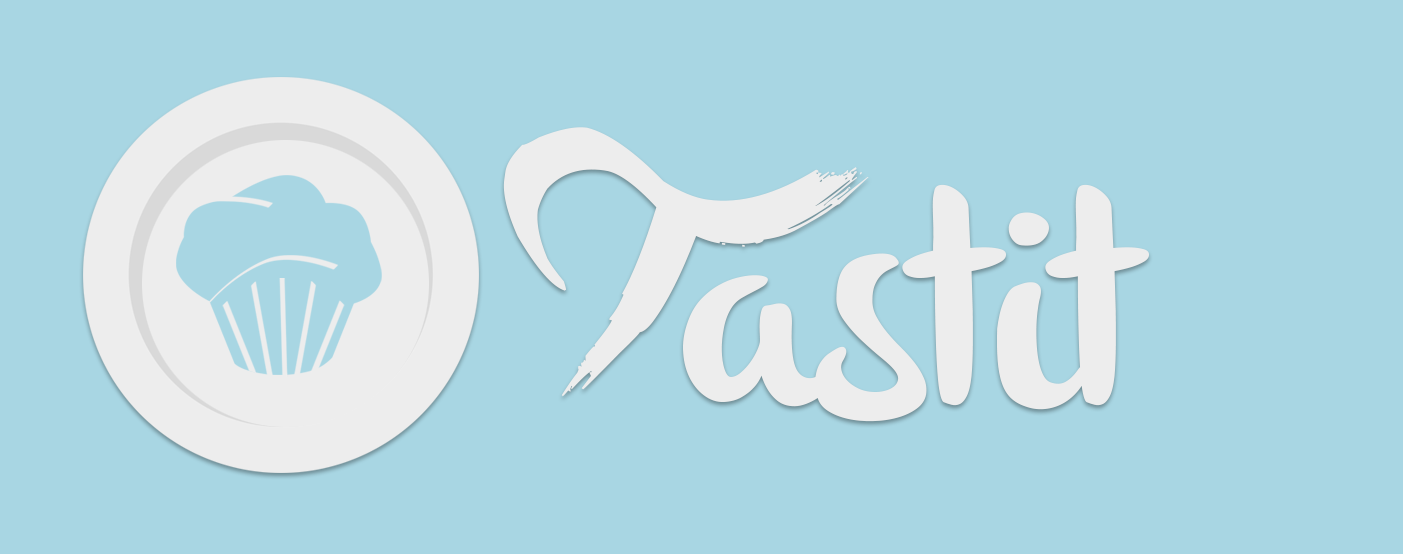
<style>
.page{position:relative;width:1403px;height:554px;background:#a8d6e3}
.page>*{position:absolute;margin:0}
.t1{font:300px "olivier";letter-spacing:-0.025em;color:#ededed}
.t2{font:300px "TheHit";letter-spacing:-0.025em;color:#ededed}
</style>
<div class="page">
<p class="t1" style="left:503px;top:127px;width:646px;height:295px"><span class="t2">T</span>astit</p>
</div>
